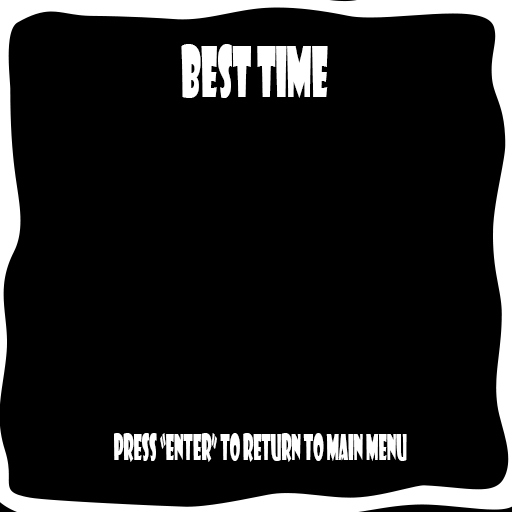
<style>
.page{position:relative;width:512px;height:512px;background:#000000}
.page>*{position:absolute;margin:0}
.t1{font:67.7px "ShowcardGothic-Reg";color:#ffffff;scale:0.44 1}
.t2{font:33.8px "ShowcardGothic-Reg";color:#ffffff;scale:0.44 1}
</style>
<div class="page">
<p class="t1" style="left:181px;top:44px;width:147px;height:54px">Best Time</p>
<p class="t2" style="left:114px;top:433px;width:293px;height:29px">press “Enter” to Return To Main Menu</p>
</div>
